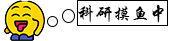
<style>
.page{position:relative;width:175px;height:41px;background:#ffffff}
.page>*{position:absolute;margin:0}
.t1{font:18px "STXingkai";color:#030001}
</style>
<div class="page">
<p class="t1" style="left:78px;top:4px;width:86px;height:19px">科研摸鱼中</p>
</div>
